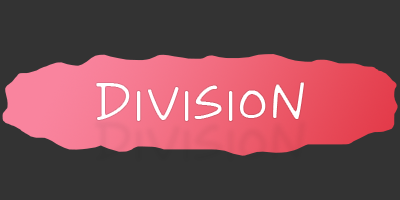
<style>
.page{position:relative;width:400px;height:200px;background:#333333}
.page>*{position:absolute;margin:0}
.t1{font:60px "Childhood"}
</style>
<div class="page">
<p class="t1" style="left:95px;top:81px;width:210px;height:41px">Division</p>
</div>
